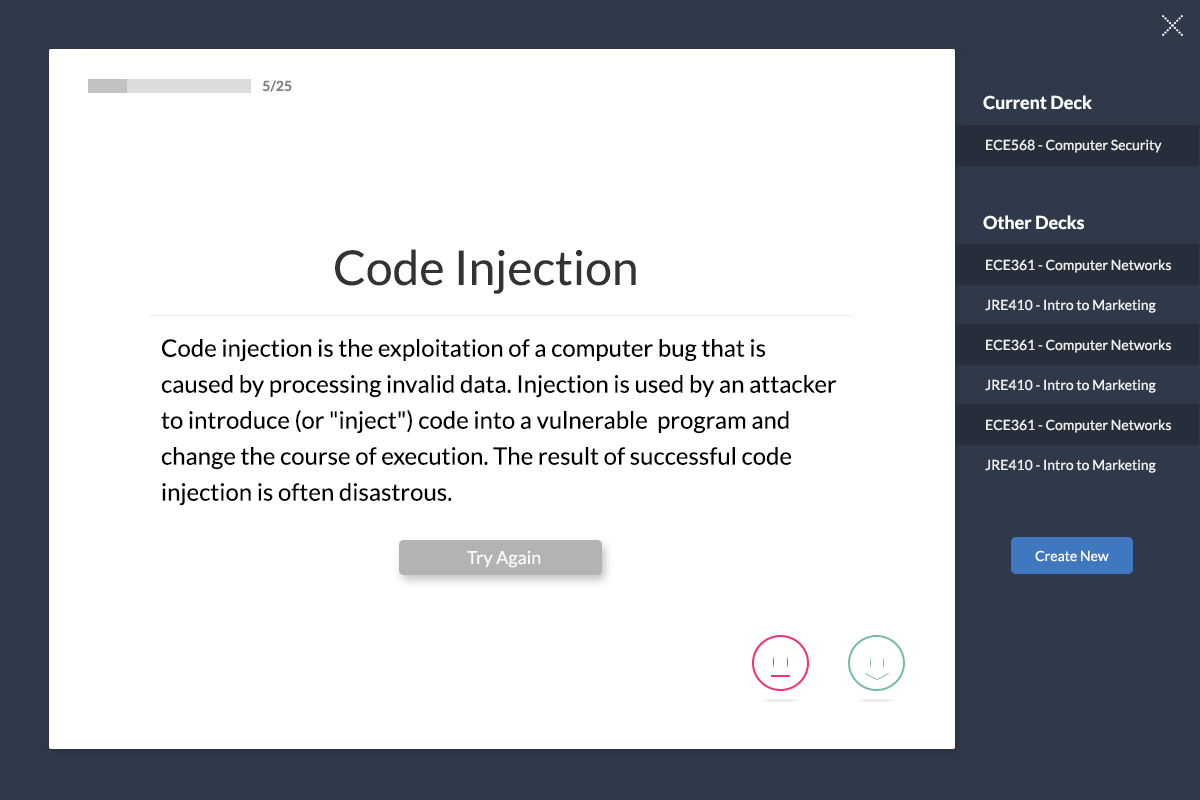
<style>
.page{position:relative;width:1200px;height:800px;background:#ffffff}
.page>*{position:absolute;margin:0}
.t1{font:14px "Lato-Bold";color:#818181}
.t2{font:18px "Lato-Bold";color:#ffffff}
.t3{font:14px "Lato-Regular";color:#eeeeee}
.t4{font:48px "Lato-Regular";color:#333333}
.t5{font:24px/36px "Lato-Regular";color:#000000}
.t6{font:18px "Lato-Regular";color:#fafafa}
.t7{font:14px "Lato-Regular";color:#fafafa}
</style>
<div class="page">
<p class="t1" style="left:262px;top:80px;width:30px;height:12px">5/25</p>
<p class="t2" style="left:983px;top:95px;width:109px;height:15px">Current Deck</p>
<p class="t3" style="left:986px;top:139px;width:176px;height:14px">ECE568 - Computer Security</p>
<p class="t2" style="left:983px;top:215px;width:101px;height:15px">Other Decks</p>
<p class="t4" style="left:335px;top:249px;width:301px;height:45px">Code Injection</p>
<p class="t3" style="left:986px;top:259px;width:185px;height:14px">ECE361 - Computer Networks</p>
<p class="t3" style="left:985px;top:299px;width:171px;height:14px">JRE410 - Intro to Marketing</p>
<p class="t5" style="left:161px;top:339px;width:676px;height:167px;text-align:right">Code injection is the exploitation of a computer bug that is caused by processing invalid data. Injection is used by an attacker to introduce (or "inject") code into a vulnerable  program and change the course of execution. The result of successful code <br>injection is often disastrous.</p>
<p class="t3" style="left:986px;top:339px;width:185px;height:14px">ECE361 - Computer Networks</p>
<p class="t3" style="left:985px;top:379px;width:171px;height:14px">JRE410 - Intro to Marketing</p>
<p class="t3" style="left:986px;top:419px;width:185px;height:14px">ECE361 - Computer Networks</p>
<p class="t3" style="left:985px;top:459px;width:171px;height:14px">JRE410 - Intro to Marketing</p>
<p class="t6" style="left:467px;top:550px;width:74px;height:18px">Try Again</p>
<p class="t7" style="left:1035px;top:550px;width:74px;height:12px">Create New</p>
</div>
